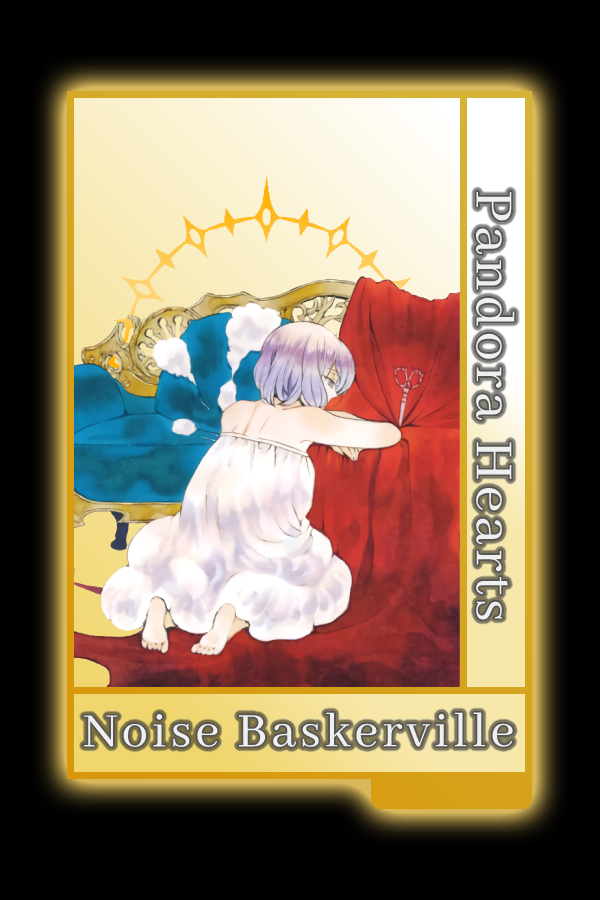
<style>
.page{position:relative;width:600px;height:900px;background:#000000}
.page>*{position:absolute;margin:0}
.t1{font:59.1px "AbhayaLibre-Regular";letter-spacing:0.072em;color:#efefef}
.t2{font:53px "AbhayaLibre-Regular";letter-spacing:0.072em;color:#efefef}
</style>
<div class="page">
<p class="t1" style="left:476px;top:192px;width:39px;height:428px;rotate:90deg">Pandora Hearts</p>
<p class="t2" style="left:84px;top:712px;width:429px;height:35px">Noise Baskerville</p>
</div>
